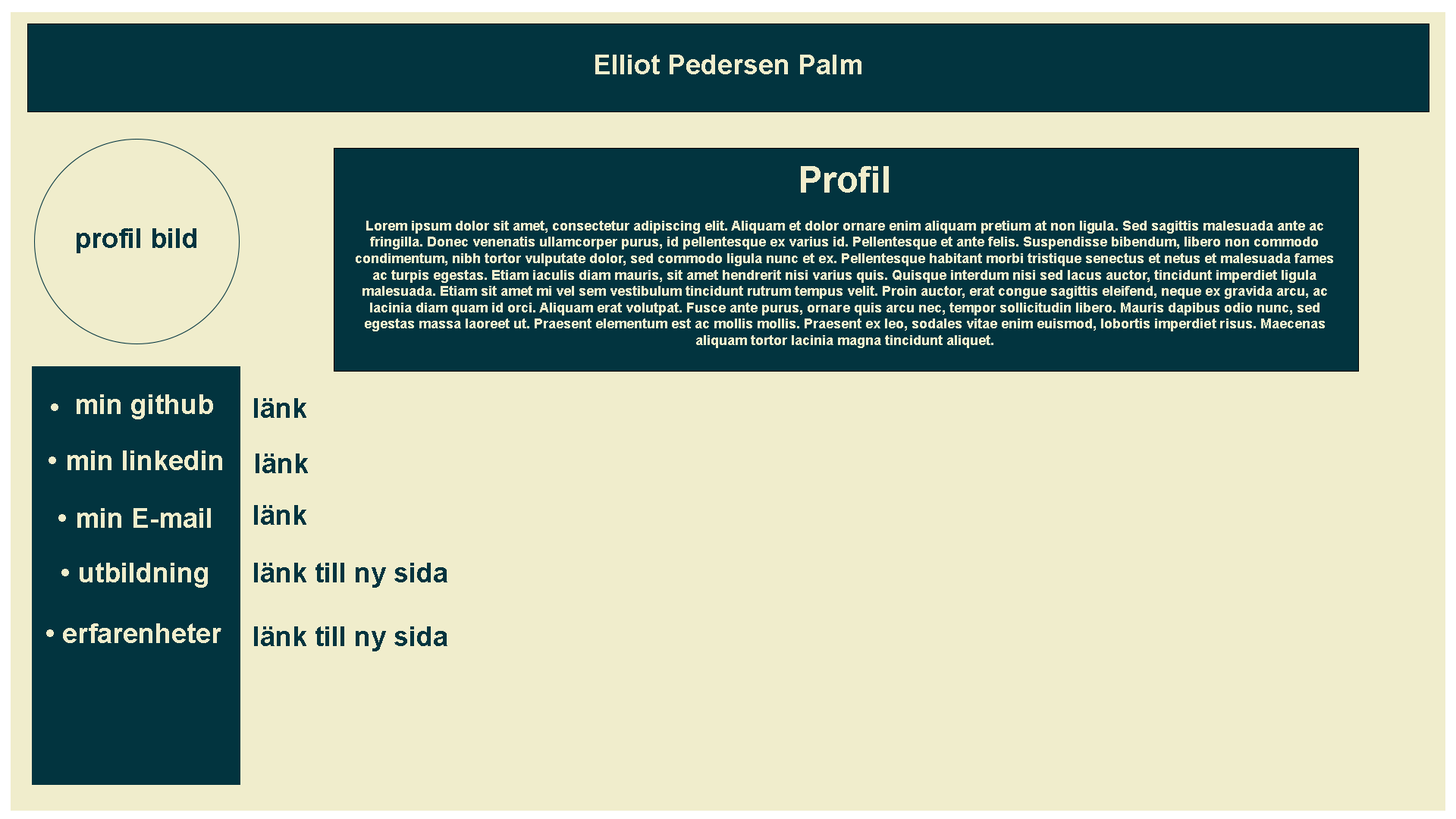
<style>
.page{position:relative;width:1456px;height:819px;background:#f0edcc}
.page>*{position:absolute;margin:0}
.t1{font:27.3px "Arial-BoldMT";color:#f0edcc}
.t2{font:36.4px "Arial-BoldMT";color:#f0edcc}
.t3{font:13.6px "Arial-BoldMT";color:#f0edcc}
.t4{font:27.3px "Arial-BoldMT";color:#02343f}
</style>
<div class="page">
<p class="t1" style="left:595px;top:55px;width:266px;height:19px">Elliot Pedersen Palm</p>
<p class="t2" style="left:801px;top:166px;width:88px;height:27px">Profil</p>
<p class="t3" style="left:356px;top:221px;width:977px;height:127px;text-align:center">Lorem ipsum dolor sit amet, consectetur adipiscing elit. Aliquam et dolor ornare enim aliquam pretium at non ligula. Sed sagittis malesuada ante ac fringilla. Donec venenatis ullamcorper purus, id pellentesque ex varius id. Pellentesque et ante felis. Suspendisse bibendum, libero non commodo condimentum, nibh tortor vulputate dolor, sed commodo ligula nunc et ex. Pellentesque habitant morbi tristique senectus et netus et malesuada fames ac turpis egestas. Etiam iaculis diam mauris, sit amet hendrerit nisi varius quis. Quisque interdum nisi sed lacus auctor, tincidunt imperdiet ligula malesuada. Etiam sit amet mi vel sem vestibulum tincidunt rutrum tempus velit. Proin auctor, erat congue sagittis eleifend, neque ex gravida arcu, ac lacinia diam quam id orci. Aliquam erat volutpat. Fusce ante purus, ornare quis arcu nec, tempor sollicitudin libero. Mauris dapibus odio nunc, sed egestas massa laoreet ut. Praesent elementum est ac mollis mollis. Praesent ex leo, sodales vitae enim euismod, lobortis imperdiet risus. Maecenas aliquam tortor lacinia magna tincidunt aliquet.</p>
<p class="t4" style="left:77px;top:228px;width:119px;height:25px">profil bild</p>
<p class="t1" style="left:77px;top:394px;width:136px;height:25px">min github</p>
<p class="t4" style="left:254px;top:398px;width:52px;height:20px">länk</p>
<p class="t1" style="left:51px;top:403px;width:7px;height:8px">•</p>
<p class="t1" style="left:49px;top:450px;width:173px;height:20px">• min linkedin</p>
<p class="t4" style="left:256px;top:453px;width:52px;height:20px">länk</p>
<p class="t1" style="left:58px;top:508px;width:153px;height:20px">• min E-mail</p>
<p class="t4" style="left:254px;top:505px;width:52px;height:20px">länk</p>
<p class="t1" style="left:61px;top:563px;width:147px;height:25px">• utbildning</p>
<p class="t4" style="left:254px;top:563px;width:193px;height:25px">länk till ny sida</p>
<p class="t1" style="left:46px;top:623px;width:175px;height:20px">• erfarenheter</p>
<p class="t4" style="left:254px;top:626px;width:193px;height:25px">länk till ny sida</p>
</div>
